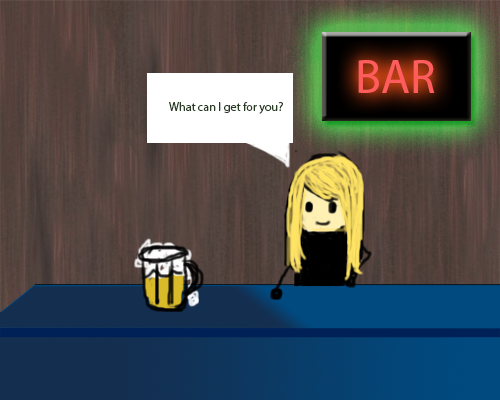
<style>
.page{position:relative;width:500px;height:400px}
.page>*{position:absolute;margin:0}
.t1{font:48px "MyriadPro-Regular";color:#ff5d5d}
.t2{font:12px "MyriadPro-Regular";color:#293b23}
</style>
<div class="page">
<p class="t1" style="left:358px;top:60px;width:77px;height:33px">BAR</p>
<p class="t2" style="left:169px;top:102px;width:114px;height:12px">What can I get for you?</p>
</div>
